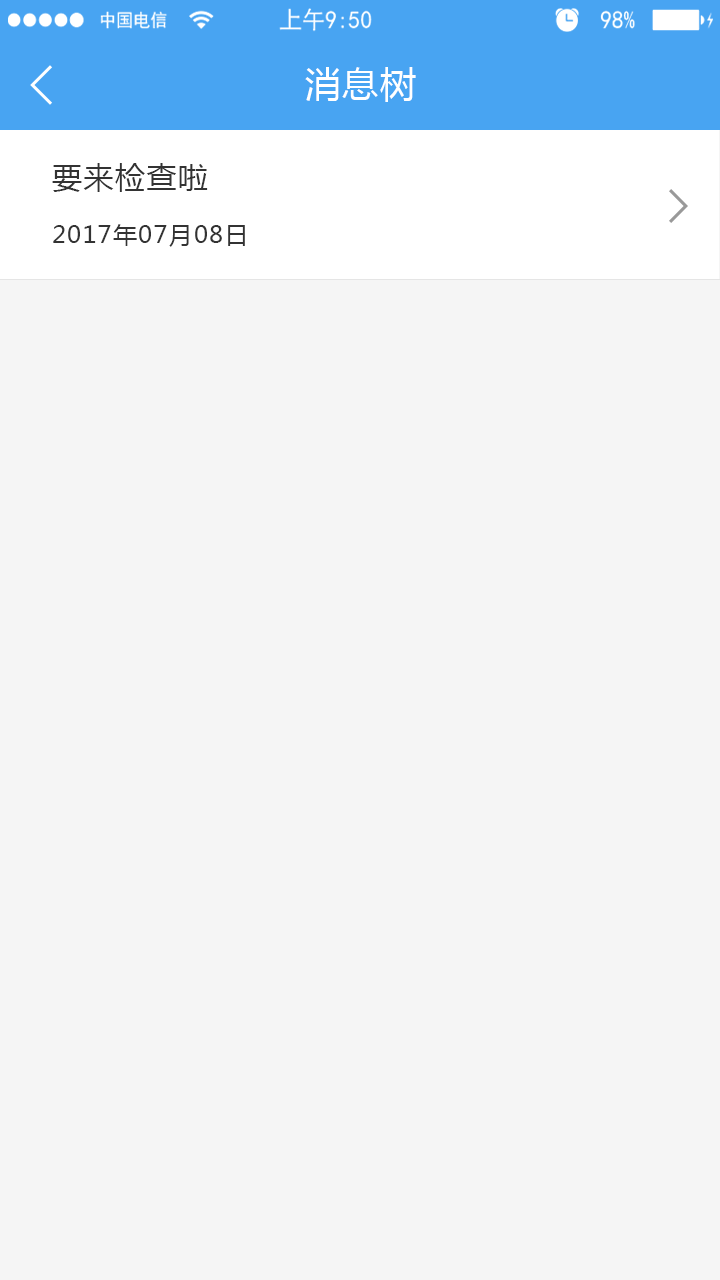
<style>
.page{position:relative;width:720px;height:1280px;background:#f5f5f5}
.page>*{position:absolute;margin:0}
.t1{font:36px "MicrosoftYaHei";letter-spacing:0.05em;color:#ffffff}
.t2{font:30px "MicrosoftYaHei";letter-spacing:0.05em;color:#333333}
.t3{font:24px "MicrosoftYaHei";letter-spacing:0.05em;color:#333333}
</style>
<div class="page">
<p class="t1" style="left:305px;top:67px;width:111px;height:35px">消息树</p>
<p class="t2" style="left:52px;top:163px;width:156px;height:29px">要来检查啦</p>
<p class="t3" style="left:53px;top:224px;width:192px;height:23px">2017年07月08日</p>
</div>
